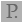
<style>
.page{position:relative;width:23px;height:23px;background:#b2b2b2}
.page>*{position:absolute;margin:0}
.t1{font:19.8px "Palatino-Roman";letter-spacing:-0.1em;color:#666666}
</style>
<div class="page">
<p class="t1" style="left:6px;top:4px;width:12px;height:14px">P.</p>
</div>
